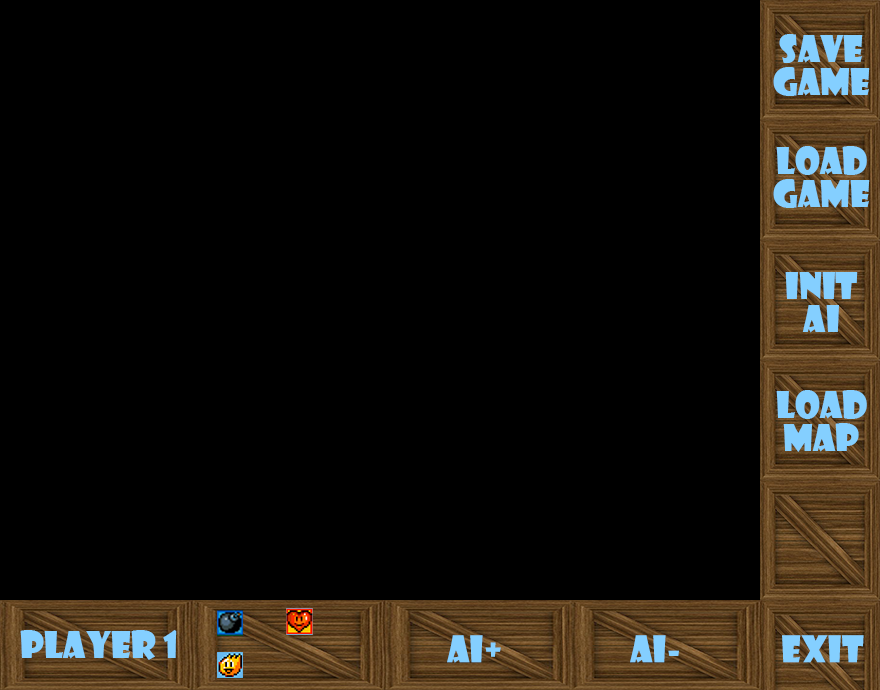
<style>
.page{position:relative;width:880px;height:690px;background:#000000}
.page>*{position:absolute;margin:0}
.t1{font:36px/33px "ShowcardGothic-Reg";color:#84cfff}
.t2{font:36px "ShowcardGothic-Reg";color:#84cfff}
</style>
<div class="page">
<p class="t1" style="left:773px;top:34px;width:97px;height:62px;text-align:center">SAVE<br>Game</p>
<p class="t1" style="left:773px;top:146px;width:97px;height:62px;text-align:center">Load<br>Game</p>
<p class="t1" style="left:785px;top:272px;width:73px;height:61px;text-align:center">init<br>Ai</p>
<p class="t1" style="left:776px;top:390px;width:91px;height:62px;text-align:center">Load<br>Map</p>
<p class="t2" style="left:20px;top:630px;width:157px;height:30px">Player 1</p>
<p class="t2" style="left:447px;top:635px;width:54px;height:28px">AI+</p>
<p class="t2" style="left:630px;top:635px;width:49px;height:28px">AI-</p>
<p class="t2" style="left:782px;top:635px;width:82px;height:28px">Exit</p>
</div>
